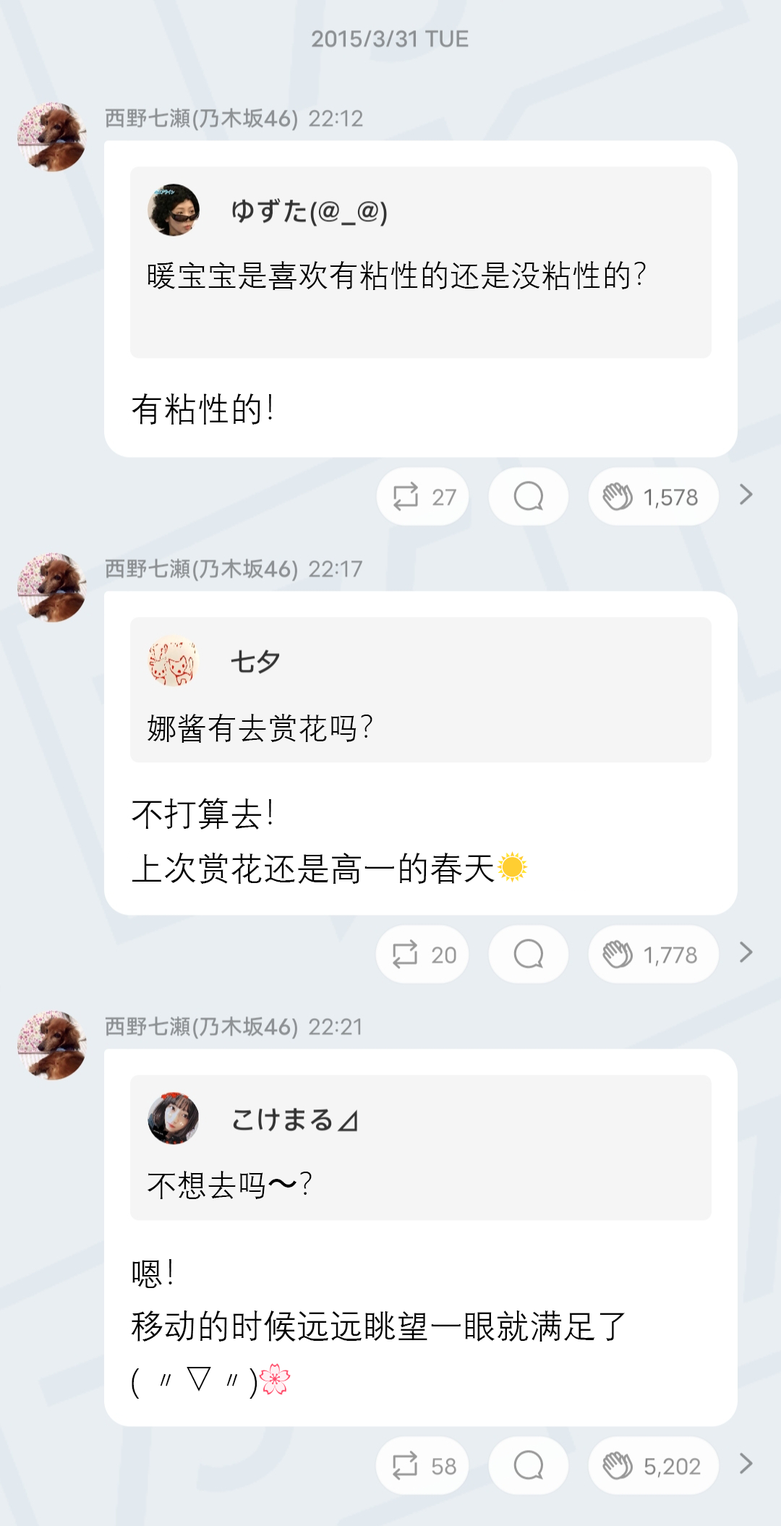
<style>
.page{position:relative;width:781px;height:1526px;background:#e9eef2}
.page>*{position:absolute;margin:0}
.t1{font:30.4px "DengXian";color:#000000}
.t2{font:33.3px "DengXian";color:#000000}
.t3{font:33.3px/52.1px "DengXian";color:#000000}
.t4{font:33.3px/52.1px "EmojiOneColor";color:#000000}
.t5{font:30.4px "AdobeHeitiStd-Regular";color:#000000}
</style>
<div class="page">
<p class="t1" style="left:148px;top:261px;width:498px;height:29px">暖宝宝是喜欢有粘性的还是没粘性的？</p>
<p class="t2" style="left:132px;top:394px;width:140px;height:31px">有粘性的！</p>
<p class="t1" style="left:147px;top:714px;width:226px;height:29px">娜酱有去赏花吗？</p>
<p class="t3" style="left:132px;top:798px;width:397px;height:86px">不打算去！ <br>上次赏花还是高一的春天<span class="t4">☀</span></p>
<p class="t1" style="left:147px;top:1171px;width:165px;height:28px">不想去吗<span class="t5">〜</span>？</p>
<p class="t3" style="left:131px;top:1259px;width:494px;height:140px">嗯！ <br>移动的时候远远眺望一眼就满足了<br>( 〃▽〃)<span class="t4">🌸</span></p>
</div>
